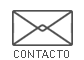
<style>
.page{position:relative;width:84px;height:60px;background:#ffffff}
.page>*{position:absolute;margin:0}
.t1{font:11px "Roboto-Thin";color:#4f4f4f}
</style>
<div class="page">
<p class="t1" style="left:14px;top:50px;width:55px;height:8px">CONTACTO</p>
</div>
